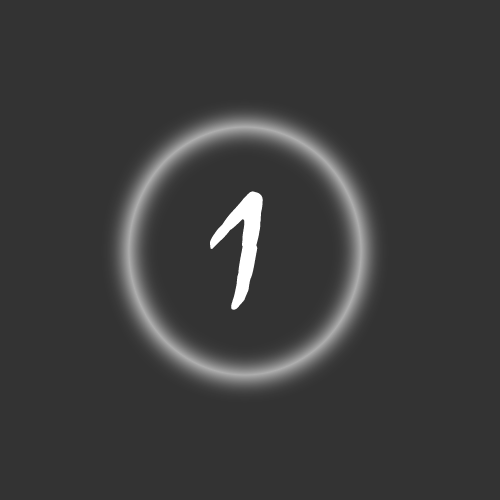
<style>
.page{position:relative;width:500px;height:500px;background:#333333}
.page>*{position:absolute;margin:0}
.t1{font:166.7px "Mistral";color:#ffffff}
</style>
<div class="page">
<p class="t1" style="left:210px;top:191px;width:53px;height:119px">1</p>
</div>
